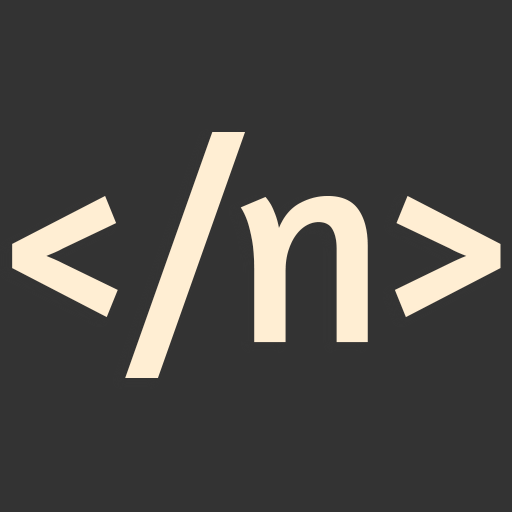
<style>
.page{position:relative;width:512px;height:512px;background:#333333}
.page>*{position:absolute;margin:0}
.t1{font:288px "Amaranth-Regular";color:#ffeed3;scale:0.95 1}
</style>
<div class="page">
<p class="t1" style="left:12px;top:132px;width:489px;height:246px">&lt;/n&gt;</p>
</div>
